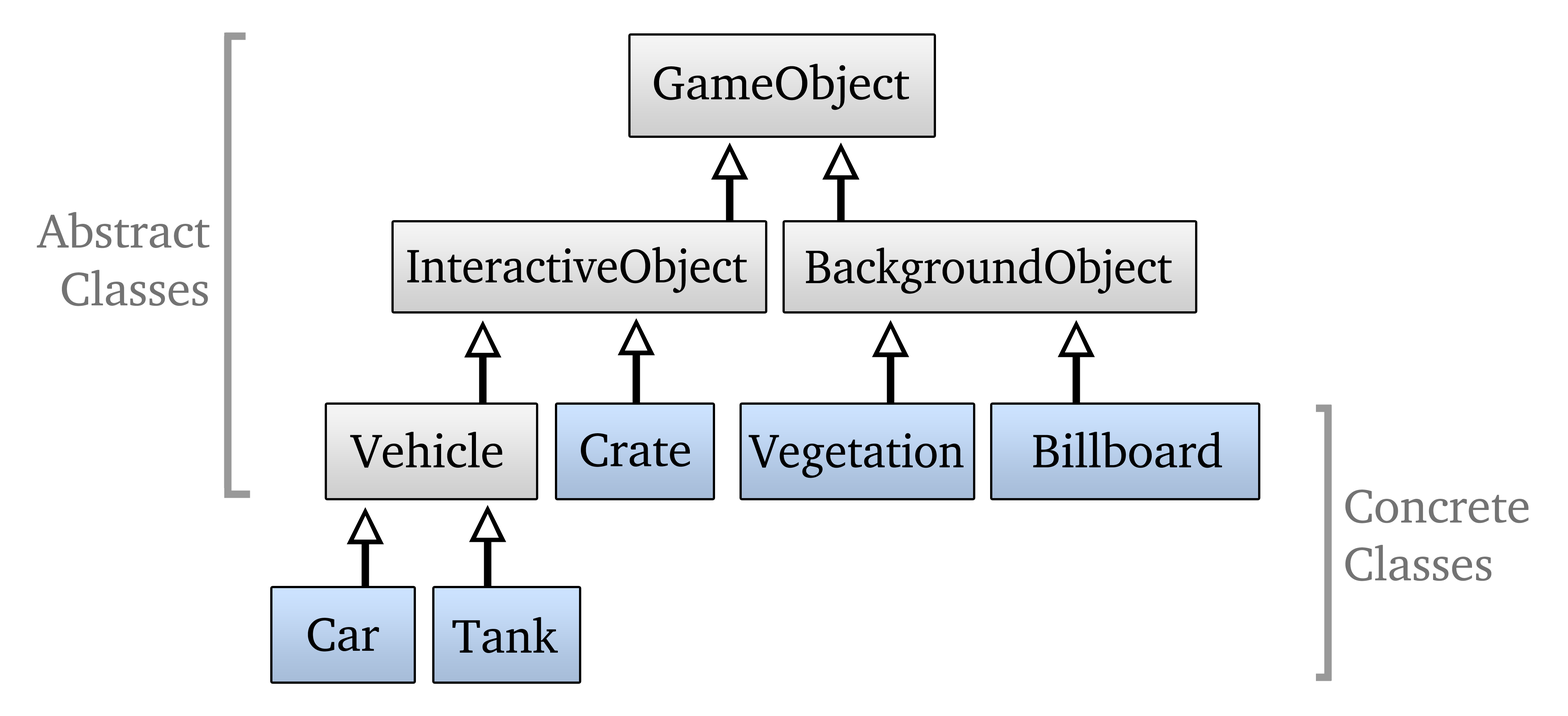
<style>
.page{position:relative;width:1568px;height:716px;background:#ffffff}
.page>*{position:absolute;margin:0}
.t1{font:48.2px "CharterBT-Roman";color:#000000}
.t2{font:48.2px "CharterBT-Roman";color:#737373}
.t3{font:48.2px "CharterBT-Roman";color:#000000;scale:0.95 1}
</style>
<div class="page">
<p class="t1" style="left:654px;top:64px;width:255px;height:46px">GameObject</p>
<p class="t2" style="left:37px;top:212px;width:172px;height:94px;text-align:right">Abstract<br>Classes</p>
<p class="t3" style="left:407px;top:247px;width:340px;height:46px">InteractiveObject</p>
<p class="t3" style="left:806px;top:248px;width:366px;height:46px">BackgroundObject</p>
<p class="t1" style="left:350px;top:432px;width:152px;height:36px">Vehicle</p>
<p class="t1" style="left:581px;top:433px;width:109px;height:34px">Crate</p>
<p class="t3" style="left:748px;top:433px;width:216px;height:45px">Vegetation</p>
<p class="t1" style="left:1033px;top:432px;width:189px;height:36px">Billboard</p>
<p class="t2" style="left:1345px;top:490px;width:184px;height:91px">Concrete<br>Classes</p>
<p class="t1" style="left:308px;top:618px;width:71px;height:34px">Car</p>
<p class="t1" style="left:452px;top:617px;width:106px;height:36px">Tank</p>
</div>
